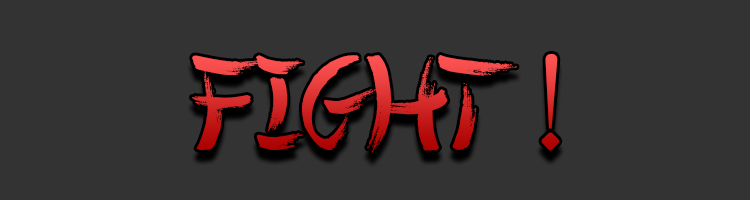
<style>
.page{position:relative;width:750px;height:200px;background:#333333}
.page>*{position:absolute;margin:0}
.t1{font:134.7px "ChineseTakeaway";scale:1.07 1}
</style>
<div class="page">
<p class="t1" style="left:192px;top:54px;width:368px;height:99px">FIGHT !</p>
</div>
